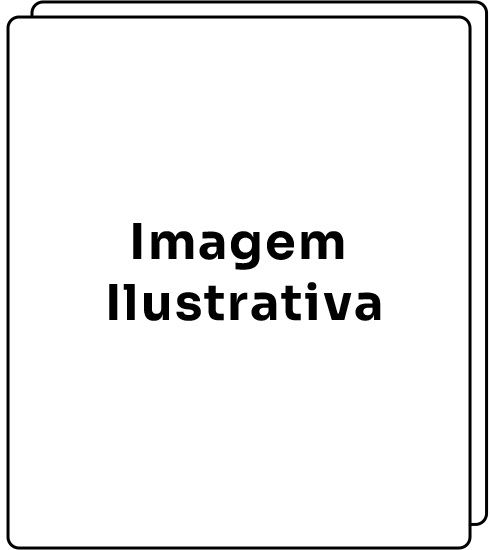
<style>
.page{position:relative;width:490px;height:550px;background:#ffffff}
.page>*{position:absolute;margin:0}
.t1{font:49.3px/61.6px "Sora-Bold";letter-spacing:0.04em;color:#000000}
</style>
<div class="page">
<p class="t1" style="left:109px;top:223px;width:272px;height:98px;text-align:center">Imagem <br>Ilustrativa</p>
</div>
